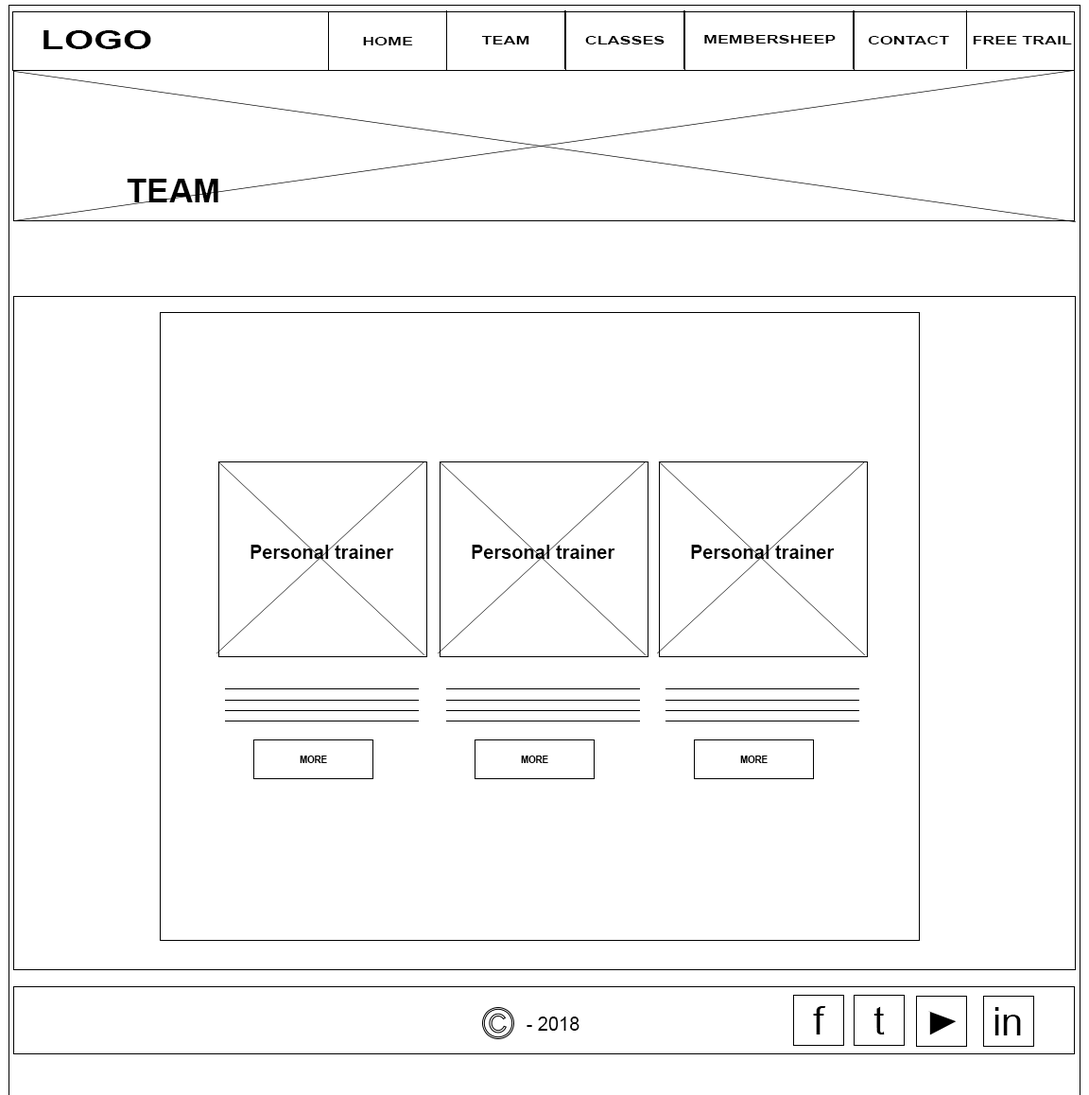
<style>
.page{position:relative;width:1089px;height:1095px;background:#ffffff}
.page>*{position:absolute;margin:0}
.t1{font:25.3px "Arial-BoldMT";color:#000000;scale:1.49 1}
.t2{font:11.3px "Arial-BoldMT";color:#000000;scale:1.49 1}
.t3{font:32.9px "Arial-BoldMT";color:#000000}
.t4{font:18.9px "Arial-BoldMT";color:#000000}
.t5{font:10.5px "Arial-BoldMT";color:#000000;scale:0.87 1}
.t6{font:39.2px "ArialMT";color:#000000}
.t7{font:18.9px "ArialMT";color:#000000}
</style>
<div class="page">
<p class="t1" style="left:43px;top:30px;width:108px;height:19px">LOGO</p>
<p class="t2" style="left:363px;top:37px;width:50px;height:8px">HOME</p>
<p class="t2" style="left:481px;top:36px;width:48px;height:8px">TEAM</p>
<p class="t2" style="left:585px;top:36px;width:80px;height:8px">CLASSES</p>
<p class="t2" style="left:704px;top:35px;width:132px;height:8px">MEMBERSHEEP</p>
<p class="t2" style="left:868px;top:36px;width:81px;height:8px">CONTACT</p>
<p class="t2" style="left:973px;top:36px;width:99px;height:8px">FREE TRAIL</p>
<p class="t3" style="left:127px;top:179px;width:91px;height:23px">TEAM</p>
<p class="t4" style="left:251px;top:545px;width:143px;height:14px">Personal trainer</p>
<p class="t4" style="left:472px;top:545px;width:143px;height:14px">Personal trainer</p>
<p class="t4" style="left:691px;top:545px;width:144px;height:14px">Personal trainer</p>
<p class="t5" style="left:300px;top:755px;width:27px;height:8px">MORE</p>
<p class="t5" style="left:521px;top:755px;width:27px;height:8px">MORE</p>
<p class="t5" style="left:740px;top:755px;width:28px;height:8px">MORE</p>
<p class="t6" style="left:813px;top:1006px;width:13px;height:28px">f</p>
<p class="t6" style="left:874px;top:1006px;width:11px;height:28px">t</p>
<p class="t6" style="left:995px;top:1007px;width:26px;height:28px">in</p>
<p class="t7" style="left:527px;top:1016px;width:53px;height:15px">- 2018</p>
</div>
